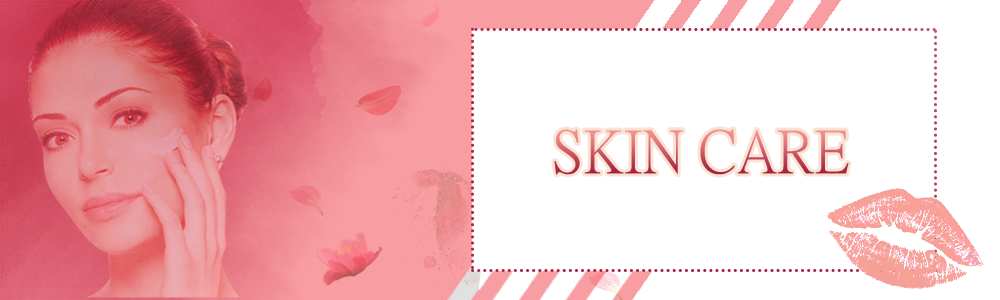
<style>
.page{position:relative;width:1000px;height:300px;background:#ffffff}
.page>*{position:absolute;margin:0}
.t1{font:60px "PMingLiU"}
</style>
<div class="page">
<p class="t1" style="left:554px;top:129px;width:295px;height:46px">SKIN CARE</p>
</div>
